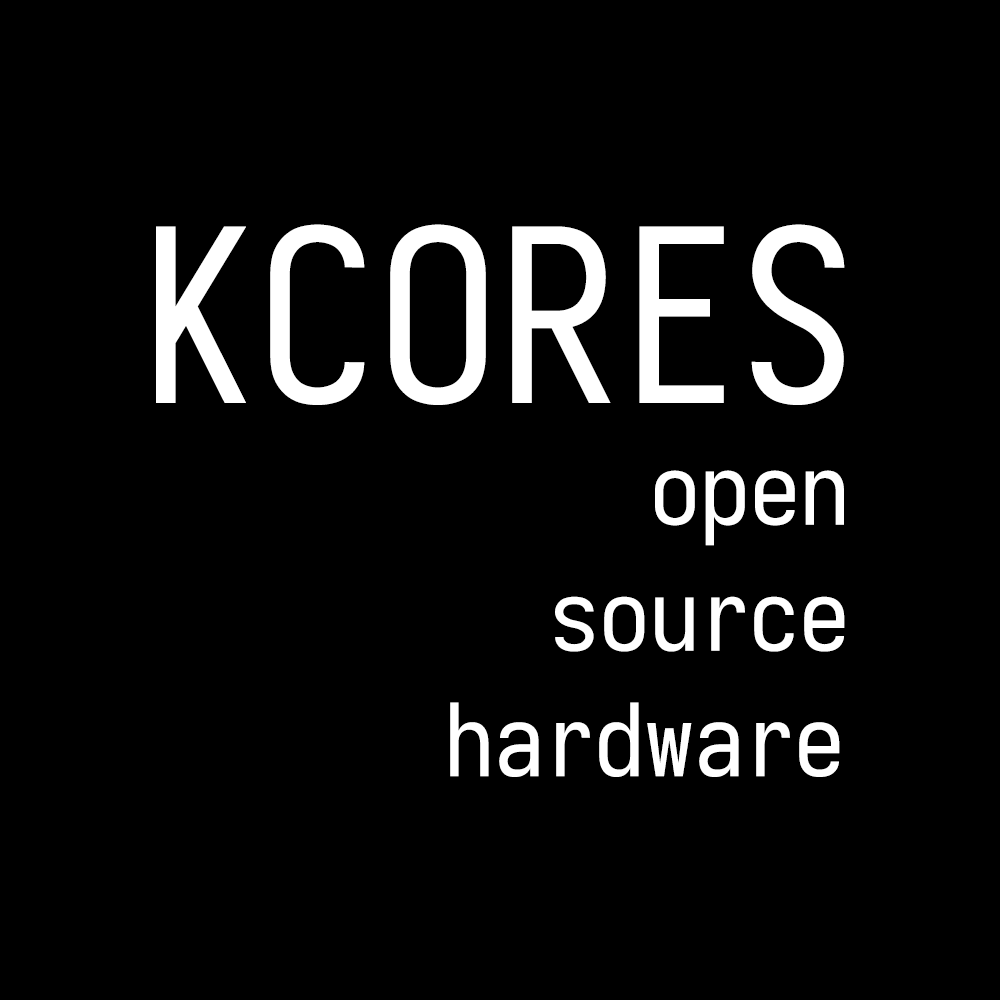
<style>
.page{position:relative;width:1000px;height:1000px;background:#000000}
.page>*{position:absolute;margin:0}
.t1{font:240px "Sarasa-Mono-SC-Regular";color:#ffffff}
.t2{font:100px "Sarasa-Mono-SC-Regular";color:#ffffff}
</style>
<div class="page">
<p class="t1" style="left:156px;top:224px;width:689px;height:181px">KCORES</p>
<p class="t2" style="left:655px;top:470px;width:189px;height:76px">open</p>
<p class="t2" style="left:555px;top:596px;width:290px;height:56px">source</p>
<p class="t2" style="left:450px;top:702px;width:390px;height:75px">hardware</p>
</div>
